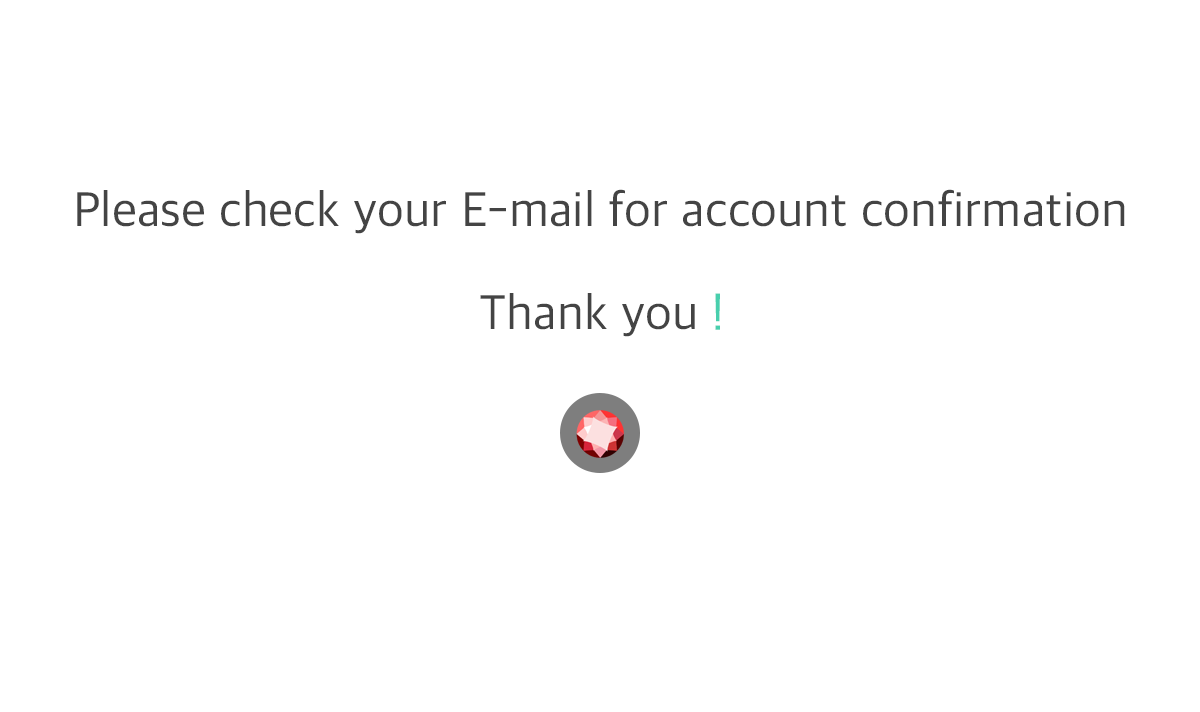
<style>
.page{position:relative;width:1200px;height:712px;background:#ffffff}
.page>*{position:absolute;margin:0}
.t1{font:50px "AppleSDGothicNeo-Regular";color:#444444}
.t2{font:50px "AppleSDGothicNeo-Regular";color:#48cfad}
</style>
<div class="page">
<p class="t1" style="left:77px;top:189px;width:1048px;height:45px">Please check your E-mail for account confirmation</p>
<p class="t1" style="left:480px;top:293px;width:240px;height:44px">Thank you <span class="t2">!</span></p>
</div>
